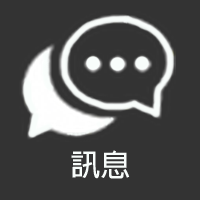
<style>
.page{position:relative;width:200px;height:200px;background:#333333}
.page>*{position:absolute;margin:0}
.t1{font:30px "AdobeFanHeitiStd-Bold";color:#f8fdfb}
</style>
<div class="page">
<p class="t1" style="left:71px;top:150px;width:59px;height:29px">訊息</p>
</div>
